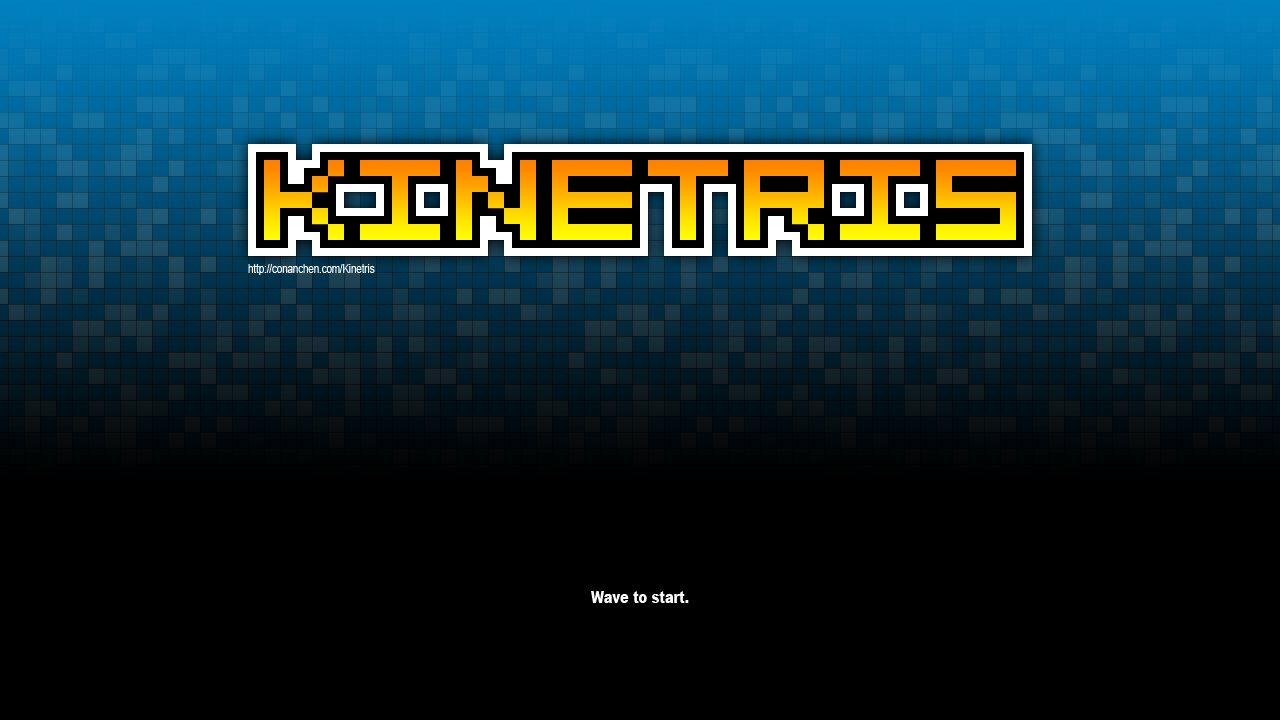
<style>
.page{position:relative;width:1280px;height:720px;background:#000000}
.page>*{position:absolute;margin:0}
.t1{font:128px "Normal"}
.t2{font:12px "ArialMT";color:#ffffff;scale:0.8 1}
.t3{font:16px "Arial-Black";color:#ffffff;scale:0.8 1}
</style>
<div class="page">
<p class="t1" style="left:264px;top:160px;width:752px;height:80px">KINETRIS</p>
<p class="t2" style="left:248px;top:264px;width:127px;height:11px">http://conanchen.com/Kinetris</p>
<p class="t3" style="left:591px;top:591px;width:98px;height:12px">Wave to start.</p>
</div>
